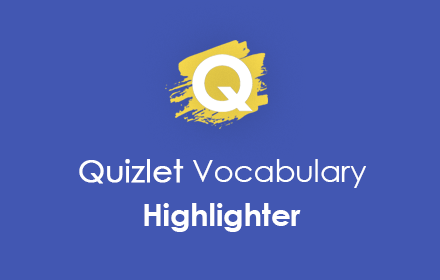
<style>
.page{position:relative;width:440px;height:280px;background:#4257b2}
.page>*{position:absolute;margin:0}
.t1{font:30.5px "CenturyGothic";color:#ffffff}
.t2{font:30.5px "CenturyGothic";color:#ffffff;font-weight:bold}
.t3{font:30.5px "CenturyGothic-Bold";color:#ffffff}
</style>
<div class="page">
<p class="t1" style="left:79px;top:159px;width:287px;height:29px"><span class="t2">Quizlet</span> Vocabulary</p>
<p class="t3" style="left:144px;top:203px;width:157px;height:29px">Highlighter</p>
</div>
